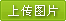
<style>
.page{position:relative;width:66px;height:21px}
.page>*{position:absolute;margin:0}
.t1{font:12px "SimSun";letter-spacing:0.1em;color:#ffffff}
</style>
<div class="page">
<p class="t1" style="left:8px;top:5px;width:50px;height:11px">上传图片</p>
</div>
